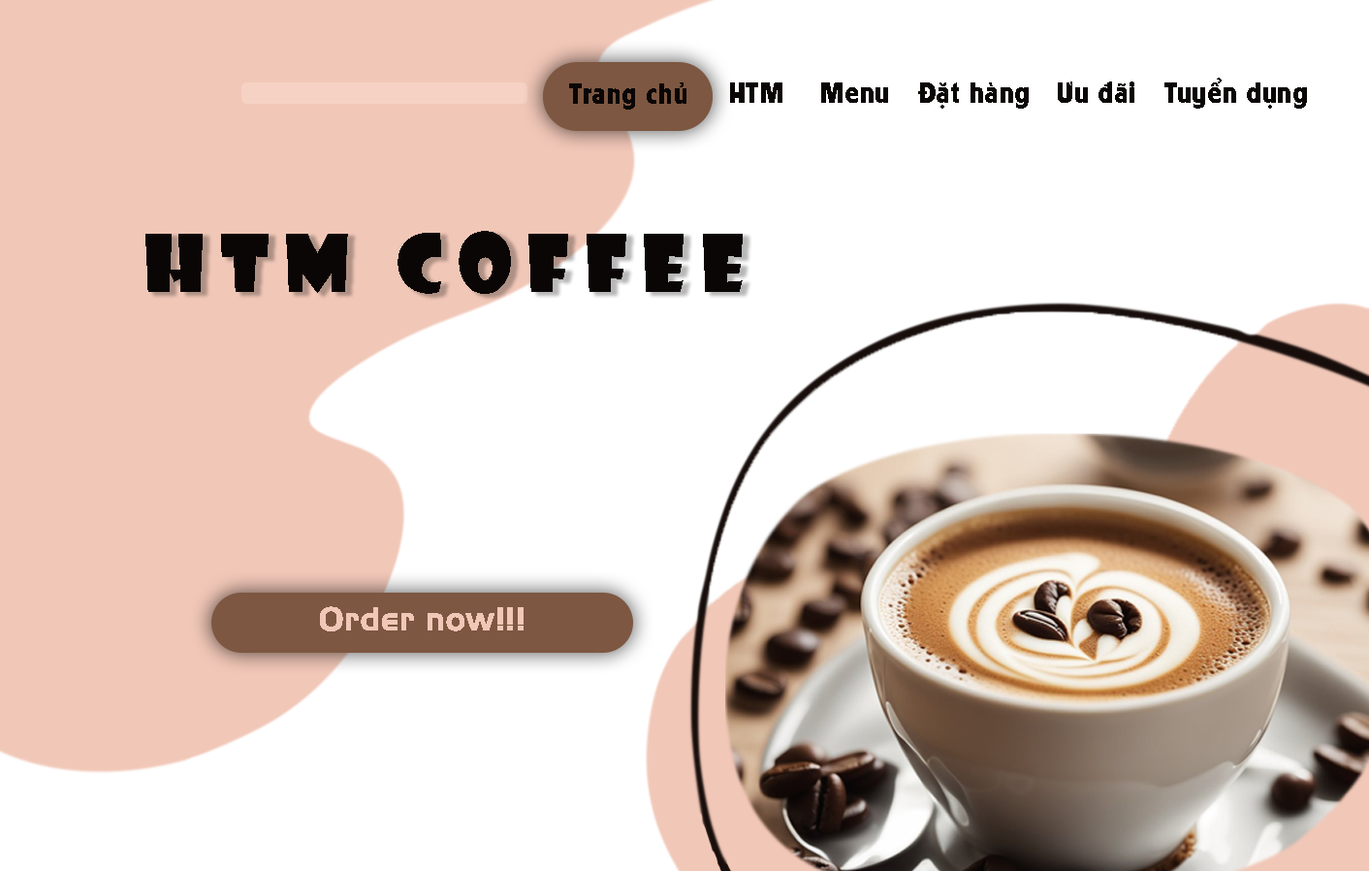
<style>
.page{position:relative;width:1369px;height:871px;background:#ffffff}
.page>*{position:absolute;margin:0}
.t1{font:26.1px "UTM-American-Sans";letter-spacing:0.05em;color:#0b0606}
.t2{font:25.6px "UTM-American-Sans";letter-spacing:0.05em;color:#0b0606}
.t3{font:78.1px "UTM-Showcard";letter-spacing:0.2em;color:#0b0606}
.t4{font:32.6px "UTM-Hanzel";letter-spacing:0.05em;color:#f1c7b7}
</style>
<div class="page">
<p class="t1" style="left:730px;top:78px;width:577px;height:31px">HTM    Menu   Đặt hàng   Ưu đãi   Tuyển dụng</p>
<p class="t2" style="left:569px;top:82px;width:118px;height:28px">Trang chủ</p>
<p class="t3" style="left:145px;top:231px;width:598px;height:63px">HTM coffee</p>
<p class="t4" style="left:320px;top:606px;width:204px;height:25px">Order now!!!</p>
</div>
